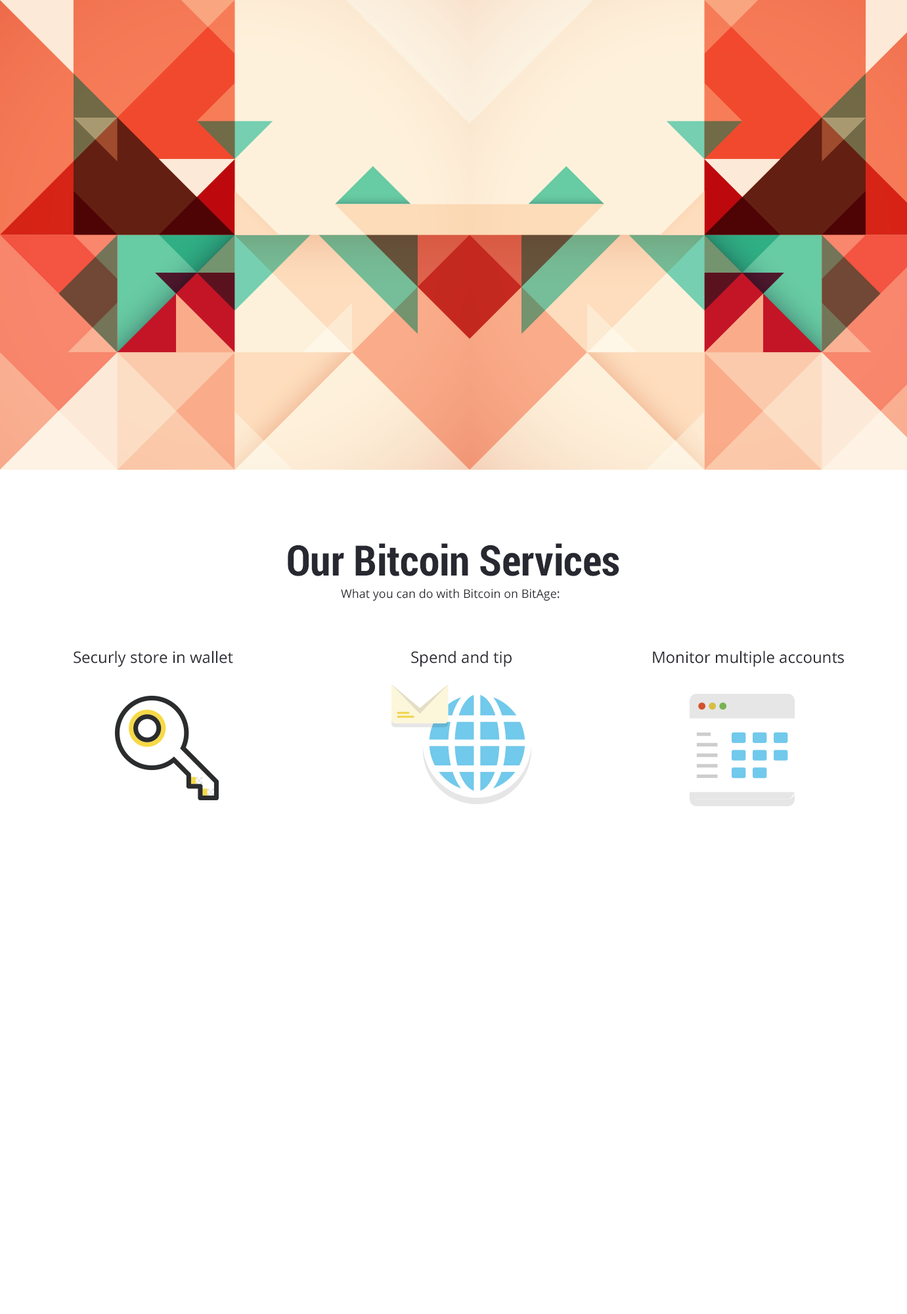
<style>
.page{position:relative;width:907px;height:1314px;background:#ffffff}
.page>*{position:absolute;margin:0}
.t1{font:42.1px "RobotoCondensed-Bold";color:#272830}
.t2{font:11.8px "OpenSans";color:#272830}
.t3{font:15.8px "OpenSans";color:#272830}
</style>
<div class="page">
<p class="t1" style="left:288px;top:543px;width:332px;height:33px">Our Bitcoin Services</p>
<p class="t2" style="left:341px;top:589px;width:219px;height:12px">What you can do with Bitcoin on BitAge:</p>
<p class="t3" style="left:74px;top:650px;width:159px;height:17px">Securly store in wallet</p>
<p class="t3" style="left:411px;top:650px;width:101px;height:17px">Spend and tip</p>
<p class="t3" style="left:653px;top:650px;width:191px;height:17px">Monitor multiple accounts</p>
</div>
